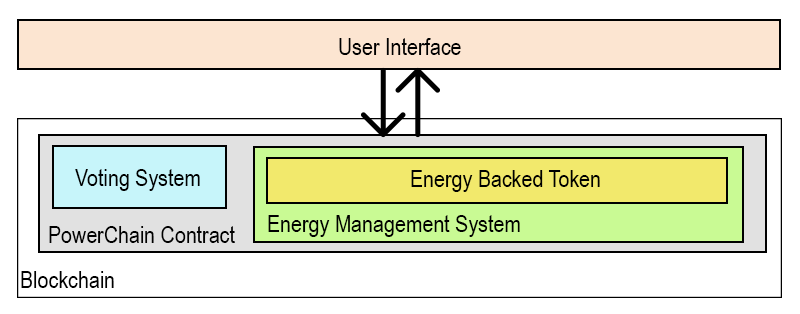
<style>
.page{position:relative;width:800px;height:314px;background:#ffffff}
.page>*{position:absolute;margin:0}
.t1{font:24px "ArialNarrow";color:#000000}
</style>
<div class="page">
<p class="t1" style="left:339px;top:38px;width:122px;height:17px">User Interface</p>
<p class="t1" style="left:75px;top:169px;width:125px;height:22px">Voting System</p>
<p class="t1" style="left:411px;top:170px;width:189px;height:22px">Energy Backed Token</p>
<p class="t1" style="left:268px;top:215px;width:252px;height:22px">Energy Management System</p>
<p class="t1" style="left:49px;top:226px;width:186px;height:17px">PowerChain Contract</p>
<p class="t1" style="left:21px;top:271px;width:93px;height:17px">Blockchain</p>
</div>
